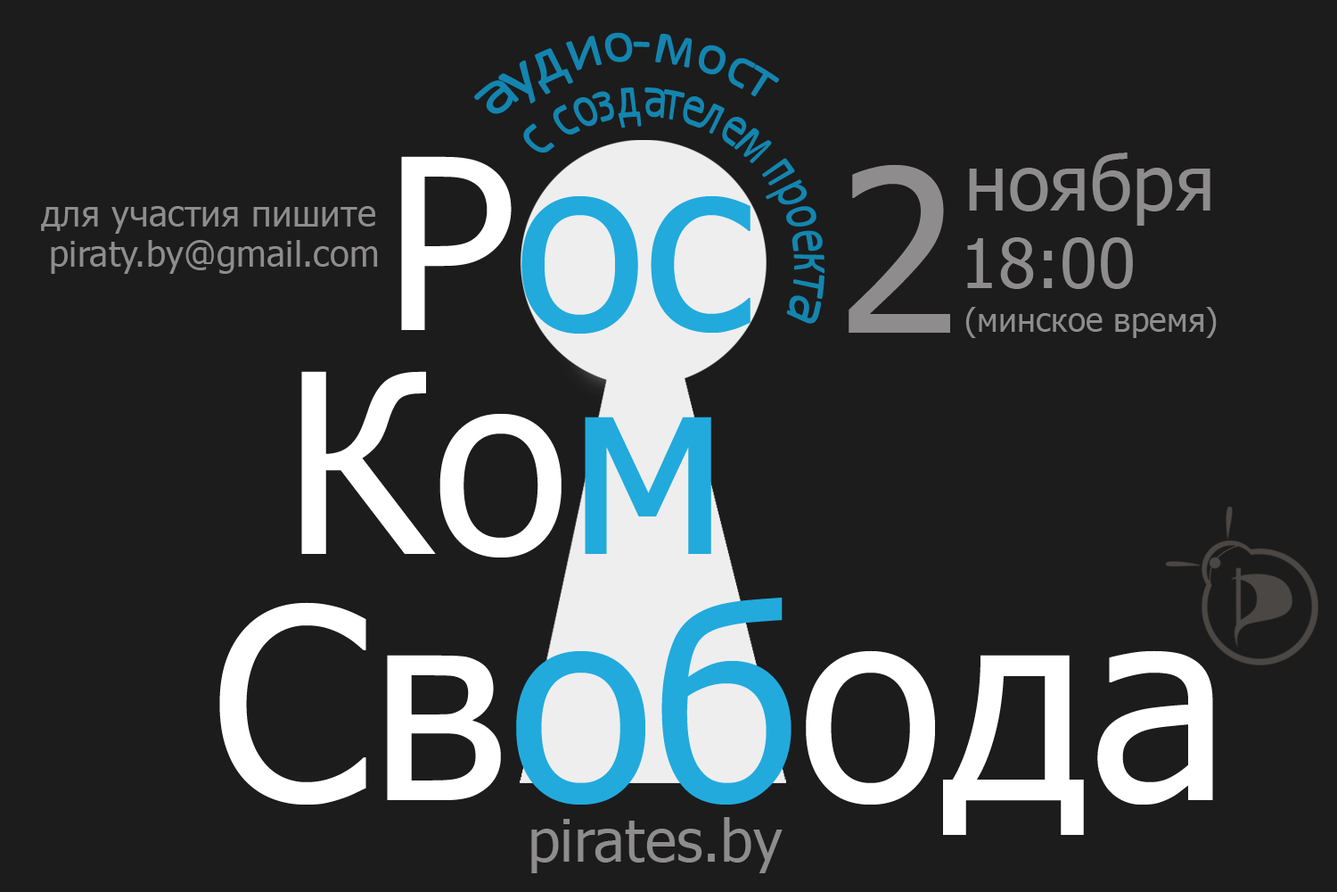
<style>
.page{position:relative;width:1337px;height:892px;background:#1c1c1c}
.page>*{position:absolute;margin:0}
.t1{font:237.7px "Tahoma";color:#22aadd}
.t2{font:237.7px "Tahoma";color:#ffffff}
.t3{font:76.7px "Tahoma";color:#8e8c8c}
.t4{font:225.5px "Tahoma";color:#8e8c8c}
.t5{font:36px "Tahoma";color:#8e8c8c}
.t6{font:69.1px "Tahoma";color:#8e8c8c}
.t7{font:33.2px "Tahoma";color:#8e8c8c}
.t8{font:249.8px "Tahoma";color:#ffffff}
.t9{font:249.8px "Tahoma";color:#22aadd}
.t10{font:264.9px "Tahoma";color:#ffffff}
.t11{font:264.9px "Tahoma";color:#22aadd}
.t12{font:59.2px "Tahoma";color:#8e8c8c}
</style>
<div class="page">
<p class="t1" style="left:401px;top:156px;width:350px;height:177px"><span class="t2">Р</span>ос</p>
<p class="t3" style="left:969px;top:152px;width:242px;height:74px">ноября</p>
<p class="t4" style="left:849px;top:164px;width:101px;height:169px">2</p>
<p class="t5" style="left:41px;top:206px;width:334px;height:28px">для участия пишите</p>
<p class="t5" style="left:51px;top:240px;width:327px;height:34px">piraty.by@gmail.com</p>
<p class="t6" style="left:967px;top:237px;width:166px;height:52px">18:00</p>
<p class="t7" style="left:966px;top:307px;width:251px;height:31px">(минское время)</p>
<p class="t8" style="left:301px;top:371px;width:410px;height:186px">Ко<span class="t9">м</span></p>
<p class="t10" style="left:219px;top:596px;width:994px;height:239px">Св<span class="t11">об</span>ода</p>
<p class="t12" style="left:531px;top:817px;width:252px;height:56px">pirates.by</p>
</div>
